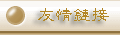
<style>
.page{position:relative;width:120px;height:35px}
.page>*{position:absolute;margin:0}
.t1{font:18px "FZLBFW--GB1-0";color:#b28524}
</style>
<div class="page">
<p class="t1" style="left:38px;top:8px;width:71px;height:13px">友情链接</p>
</div>
